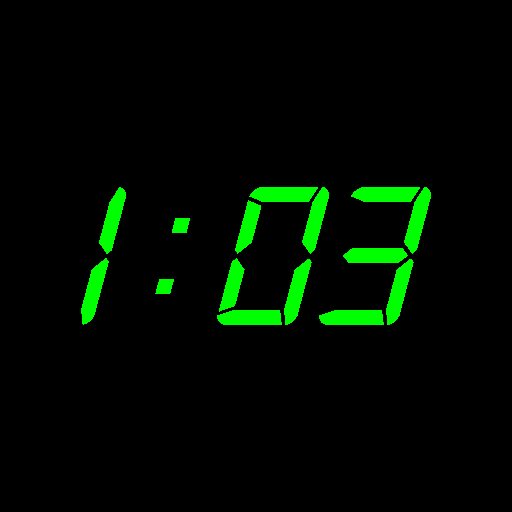
<style>
.page{position:relative;width:512px;height:512px;background:#000000}
.page>*{position:absolute;margin:0}
.t1{font:218.7px "Digital-7Mono";letter-spacing:0.025em;color:#00ff00;scale:0.97 1}
</style>
<div class="page">
<p class="t1" style="left:81px;top:187px;width:350px;height:138px">1:03</p>
</div>
